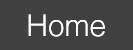
<style>
.page{position:relative;width:133px;height:50px;background:#404040}
.page>*{position:absolute;margin:0}
.t1{font:30px "Helvetica-Light";color:#ffffff}
</style>
<div class="page">
<p class="t1" style="left:28px;top:14px;width:77px;height:23px">Home</p>
</div>
